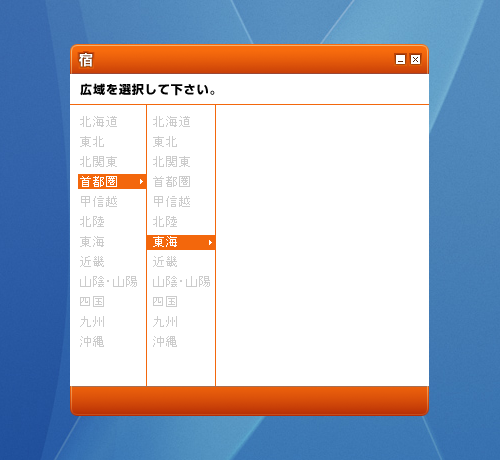
<style>
.page{position:relative;width:500px;height:460px;background:#ffffff}
.page>*{position:absolute;margin:0}
.t1{font:14px "ShinGoPro-Medium";letter-spacing:-0.02em;color:#ffffff;font-weight:bold}
.t2{font:12px "ShinGoPro-Bold";letter-spacing:0.08em;color:#000000}
.t3{font:12px/20px "MS-UIGothic";letter-spacing:0.08em;color:#cccccc}
.t4{font:12px/20px "MS-UIGothic";letter-spacing:0.08em;color:#ffffff}
</style>
<div class="page">
<p class="t1" style="left:79px;top:53px;width:14px;height:14px">宿</p>
<p class="t2" style="left:80px;top:83px;width:135px;height:13px">広域を選択して下さい。</p>
<p class="t3" style="left:80px;top:116px;width:57px;height:231px">北海道<br>東北<br>北関東<br><span class="t4">首都圏<br></span>甲信越<br>北陸<br>東海<br>近畿<br>山陰・山陽<br>四国<br>九州<br>沖縄</p>
<p class="t3" style="left:153px;top:116px;width:57px;height:231px">北海道<br>東北<br>北関東<br>首都圏<br>甲信越<br>北陸<br><span class="t4">東海<br></span>近畿<br>山陰・山陽<br>四国<br>九州<br>沖縄</p>
</div>
